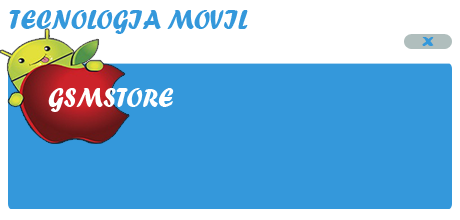
<style>
.page{position:relative;width:460px;height:220px;background:#3498db}
.page>*{position:absolute;margin:0}
.t1{font:27.5px "ForteMT";color:#3498db;scale:0.91 1}
.t2{font:19.1px "ForteMT";color:#3498db;scale:1.19 1}
.t3{font:27.5px "ForteMT";color:#ffffff;scale:0.91 1}
</style>
<div class="page">
<p class="t1" style="left:9px;top:10px;width:239px;height:24px">TECNOLOGIA MOVIL</p>
<p class="t2" style="left:422px;top:37px;width:12px;height:9px">x</p>
<p class="t3" style="left:48px;top:88px;width:126px;height:24px">GSMSTORE</p>
</div>
